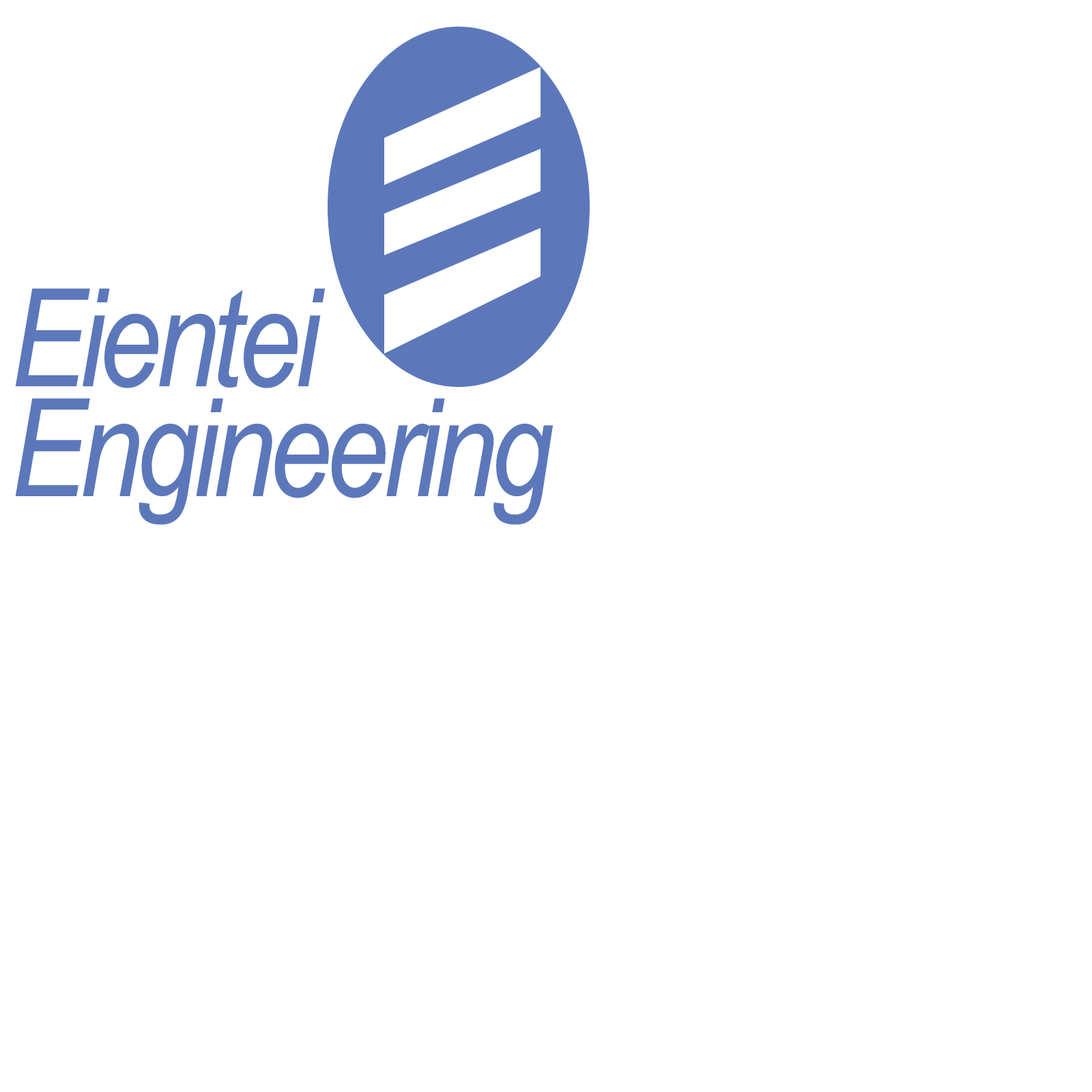
<style>
.page{position:relative;width:1092px;height:1092px;background:#ffffff}
.page>*{position:absolute;margin:0}
.t1{font:136.5px/109.9px "ArialNarrow-Italic";letter-spacing:-0.04em;color:#5c78bb}
</style>
<div class="page">
<p class="t1" style="left:15px;top:288px;width:538px;height:237px">Eientei<br>Engineering</p>
</div>
